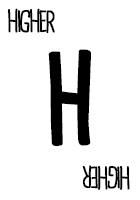
<style>
.page{position:relative;width:140px;height:200px;background:#ffffff}
.page>*{position:absolute;margin:0}
.t1{font:28.7px "CardenioModern-Reg";letter-spacing:-0.1em;color:#000000;text-transform:uppercase;font-weight:bold;scale:0.87 1}
.t2{font:115px "CardenioModern-Bold";letter-spacing:-0.1em;color:#000000;text-transform:uppercase;font-weight:bold;scale:0.87 1}
</style>
<div class="page">
<p class="t1" style="left:7px;top:8px;width:48px;height:26px">higher</p>
<p class="t2" style="left:48px;top:49px;width:43px;height:97px">H</p>
<p class="t1" style="left:82px;top:165px;width:48px;height:25px;rotate:180deg">higher</p>
</div>
